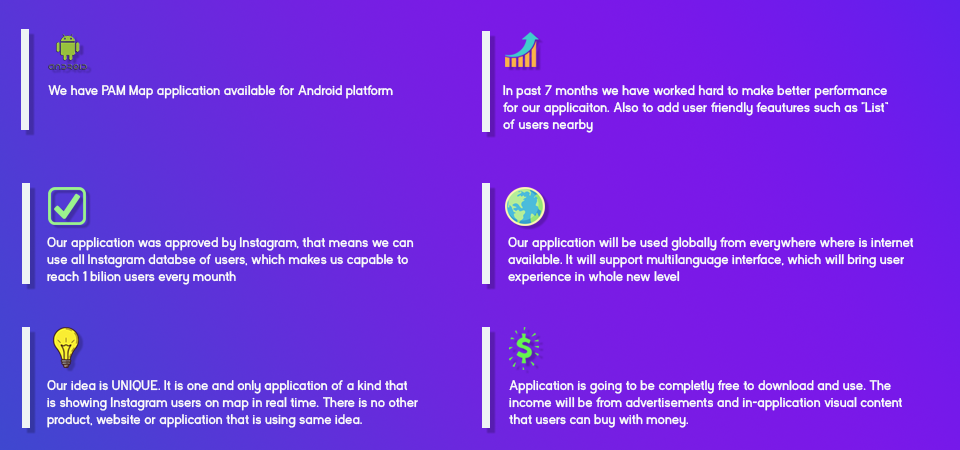
<style>
.page{position:relative;width:960px;height:450px}
.page>*{position:absolute;margin:0}
.t1{font:14px "KayakSans-Bold";color:#fcfbfa}
</style>
<div class="page">
<p class="t1" style="left:48px;top:85px;width:345px;height:14px">We have PAM Map application available for Android platform</p>
<p class="t1" style="left:503px;top:85px;width:386px;height:48px">In past 7 months we have worked hard to make better performance<br>for our applicaiton. Also to add user friendly feautures such as “List”<br>of users nearby</p>
<p class="t1" style="left:47px;top:237px;width:367px;height:48px">Our application was approved by Instagram, that means we can<br>use all Instagram databse of users, which makes us capable to<br>reach 1 bilion users every mounth</p>
<p class="t1" style="left:508px;top:237px;width:406px;height:48px">Our application will be used globally from everywhere where is internet<br>available. It will support multilanguage interface, which will bring user<br>experience in whole new level</p>
<p class="t1" style="left:47px;top:380px;width:371px;height:48px">Our idea is UNIQUE. It is one and only application of a kind that<br>is showing Instagram users on map in real time. There is no other<br>product, website or application that is using same idea.</p>
<p class="t1" style="left:509px;top:380px;width:393px;height:48px">Application is going to be completly free to download and use. The<br>income will be from advertisements and in-application visual content<br>that users can buy with money.</p>
</div>
